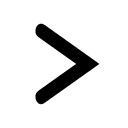
<style>
.page{position:relative;width:128px;height:128px;background:#ffffff}
.page>*{position:absolute;margin:0}
.t1{font:142px "CourierNewPS-BoldMT";color:#000000;scale:0.78 1}
</style>
<div class="page">
<p class="t1" style="left:35px;top:23px;width:65px;height:82px">&gt;</p>
</div>
